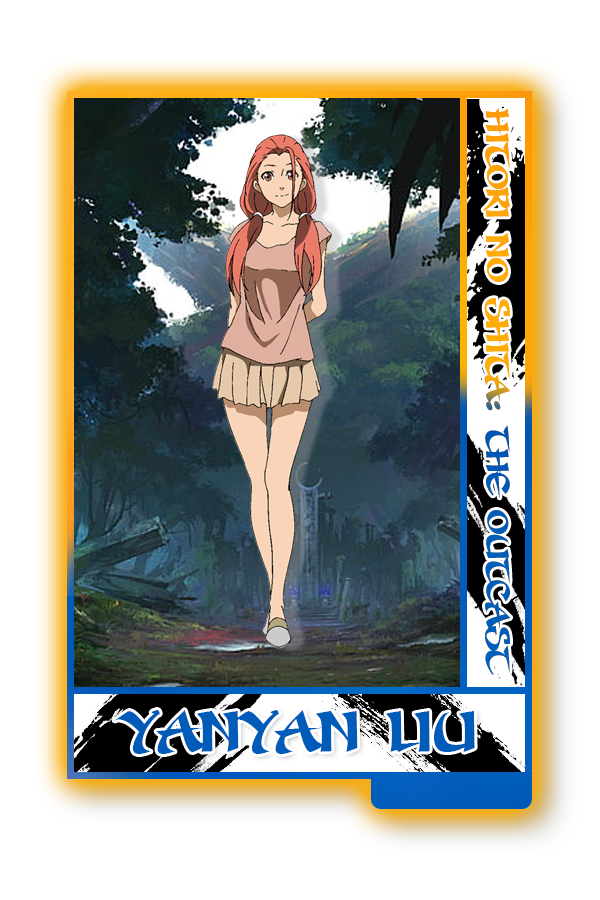
<style>
.page{position:relative;width:600px;height:900px;background:#ffffff}
.page>*{position:absolute;margin:0}
.t1{font:36.7px "SevenSwordsmenBB"}
.t2{font:64.5px "SevenSwordsmenBB";color:#005bb9}
</style>
<div class="page">
<p class="t1" style="left:483px;top:108px;width:28px;height:567px;rotate:90deg">HITORI NO SHITA: THE OUTCAST</p>
<p class="t2" style="left:114px;top:710px;width:361px;height:44px">YANYAN LIU</p>
</div>
